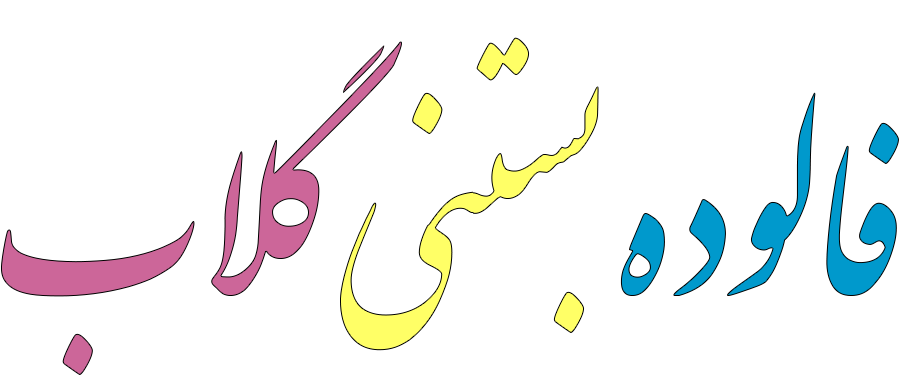
<style>
.page{position:relative;width:900px;height:376px;background:#ffffff}
.page>*{position:absolute;margin:0}
.t1{font:332.2px "IranNastaliq";color:#0099cc;scale:0.95 1}
.t2{font:332.2px "IranNastaliq";color:#ffff66;scale:0.95 1}
.t3{font:332.2px "IranNastaliq";color:#cc6699;scale:0.95 1}
</style>
<div class="page">
<p class="t1" style="left:1px;top:37px;width:898px;height:338px">فالوده <span class="t2">بستنی </span><span class="t3">گلاب</span></p>
</div>
